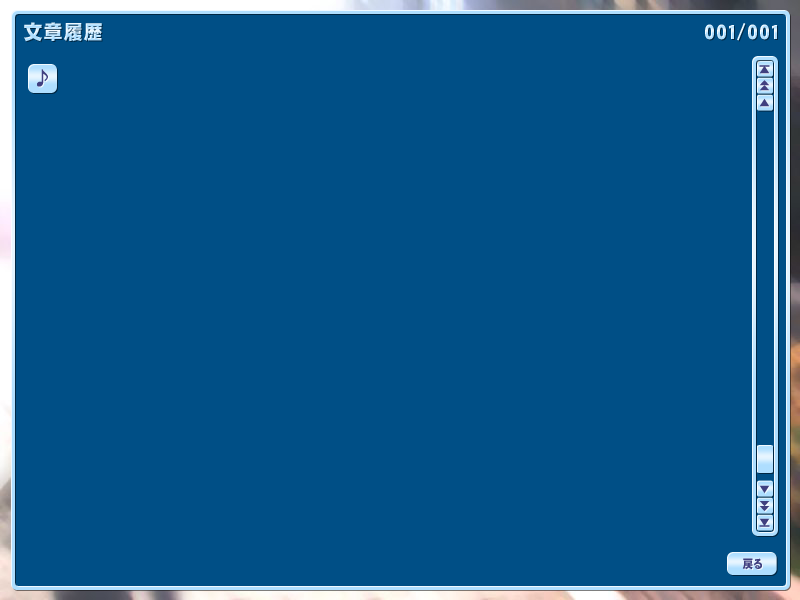
<style>
.page{position:relative;width:800px;height:600px;background:#004f86}
.page>*{position:absolute;margin:0}
.t1{font:20px "DFGothic-EB-WING-RKSJ-H";letter-spacing:0.05em;scale:0.95 1}
.t2{font:12.1px "DFGothic-EB-WING-RKSJ-H";letter-spacing:0.05em;scale:0.82 1}
.t3{font:9.9px "DFGothic-EB-WING-RKSJ-H";letter-spacing:0.05em;color:#404080;scale:1.11 1}
.t4{font:20px "DFGothic-EB-WING-RKSJ-H";letter-spacing:0.05em;color:#404080}
.t5{font:6.6px "DFGothic-EB-WING-RKSJ-H";letter-spacing:0.05em;color:#404080;scale:1.67 1}
.t6{font:12px "DFGothic-EB-WING-RKSJ-H";letter-spacing:0.05em;color:#404080;scale:0.87 1}
</style>
<div class="page">
<p class="t1" style="left:24px;top:22px;width:78px;height:20px">文章履歴</p>
<p class="t2" style="left:759px;top:65px;width:11px;height:2px">＿</p>
<p class="t3" style="left:759px;top:65px;width:11px;height:9px">▲</p>
<p class="t4" style="left:37px;top:69px;width:11px;height:18px">♪</p>
<p class="t5" style="left:759px;top:80px;width:11px;height:6px">▲</p>
<p class="t5" style="left:759px;top:85px;width:11px;height:6px">▲</p>
<p class="t3" style="left:759px;top:98px;width:11px;height:9px">▲</p>
<p class="t3" style="left:759px;top:485px;width:11px;height:9px">▼</p>
<p class="t5" style="left:759px;top:501px;width:11px;height:5px">▼</p>
<p class="t5" style="left:759px;top:506px;width:11px;height:5px">▼</p>
<p class="t3" style="left:759px;top:518px;width:11px;height:9px">▼</p>
<p class="t2" style="left:759px;top:525px;width:11px;height:2px">＿</p>
<p class="t6" style="left:742px;top:558px;width:20px;height:12px">戻る</p>
</div>
